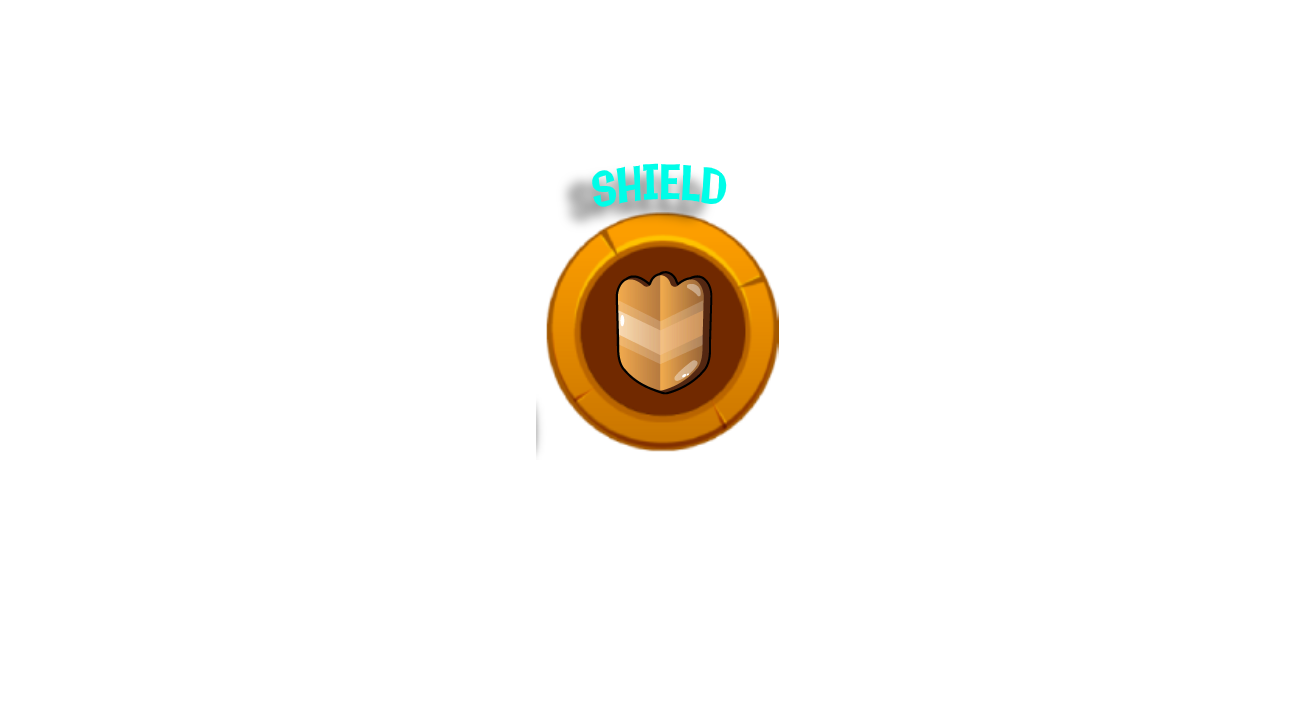
<style>
.page{position:relative;width:1315px;height:720px;background:#ffffff}
.page>*{position:absolute;margin:0}
.t1{font:47.9px "Galindo-Regular";color:#0ffde9;scale:0.71 1}
</style>
<div class="page">
<p class="t1" style="left:592px;top:163px;width:135px;height:44px">SHIELD</p>
</div>
